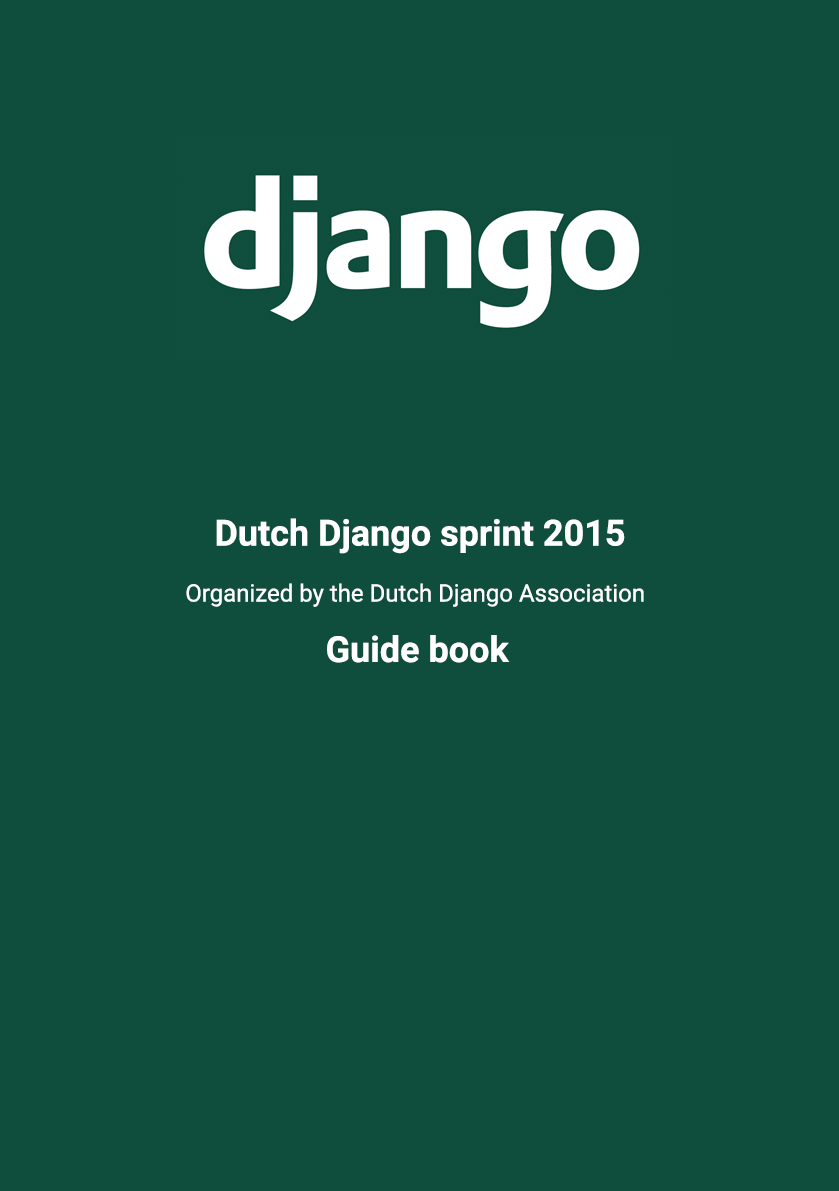
<style>
.page{position:relative;width:839px;height:1191px;background:#0f4e3c}
.page>*{position:absolute;margin:0}
.t1{font:36px "Roboto-Bold";color:#ffffff}
.t2{font:24px "Roboto-Regular";color:#ffffff}
</style>
<div class="page">
<p class="t1" style="left:216px;top:518px;width:409px;height:36px">Dutch Django sprint 2015</p>
<p class="t2" style="left:186px;top:583px;width:458px;height:24px">Organized by the Dutch Django Association</p>
<p class="t1" style="left:327px;top:635px;width:183px;height:28px">Guide book</p>
</div>
